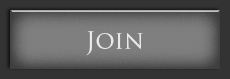
<style>
.page{position:relative;width:230px;height:79px;background:#333333}
.page>*{position:absolute;margin:0}
.t1{font:24px "TrajanPro3-Regular";color:#e9e9e9}
</style>
<div class="page">
<p class="t1" style="left:86px;top:31px;width:57px;height:25px">Join</p>
</div>
